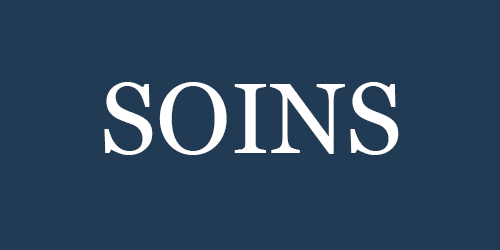
<style>
.page{position:relative;width:500px;height:250px;background:#223b54}
.page>*{position:absolute;margin:0}
.t1{font:100px "Georgia";color:#ffffff}
</style>
<div class="page">
<p class="t1" style="left:104px;top:82px;width:295px;height:73px">SOINS</p>
</div>
